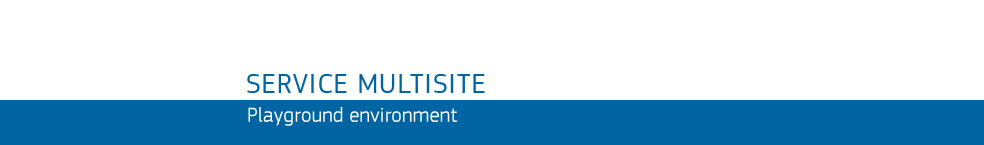
<style>
.page{position:relative;width:984px;height:145px;background:#ffffff}
.page>*{position:absolute;margin:0}
.t1{font:28px "PFSquareSansPro-Regular";letter-spacing:0.04em;color:#0065a2;text-transform:uppercase}
.t2{font:21px "PFSquareSansPro-Regular";color:#ffffff}
</style>
<div class="page">
<p class="t1" style="left:247px;top:74px;width:238px;height:19px">SERVICE MULTISITE</p>
<p class="t2" style="left:248px;top:107px;width:210px;height:19px">Playground environment</p>
</div>
